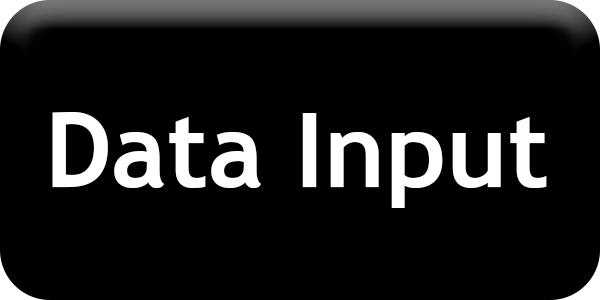
<style>
.page{position:relative;width:600px;height:300px;background:#000000}
.page>*{position:absolute;margin:0}
.t1{font:104.2px "TrebuchetMS-Bold";color:#ffffff}
</style>
<div class="page">
<p class="t1" style="left:52px;top:112px;width:495px;height:96px">Data Input</p>
</div>
